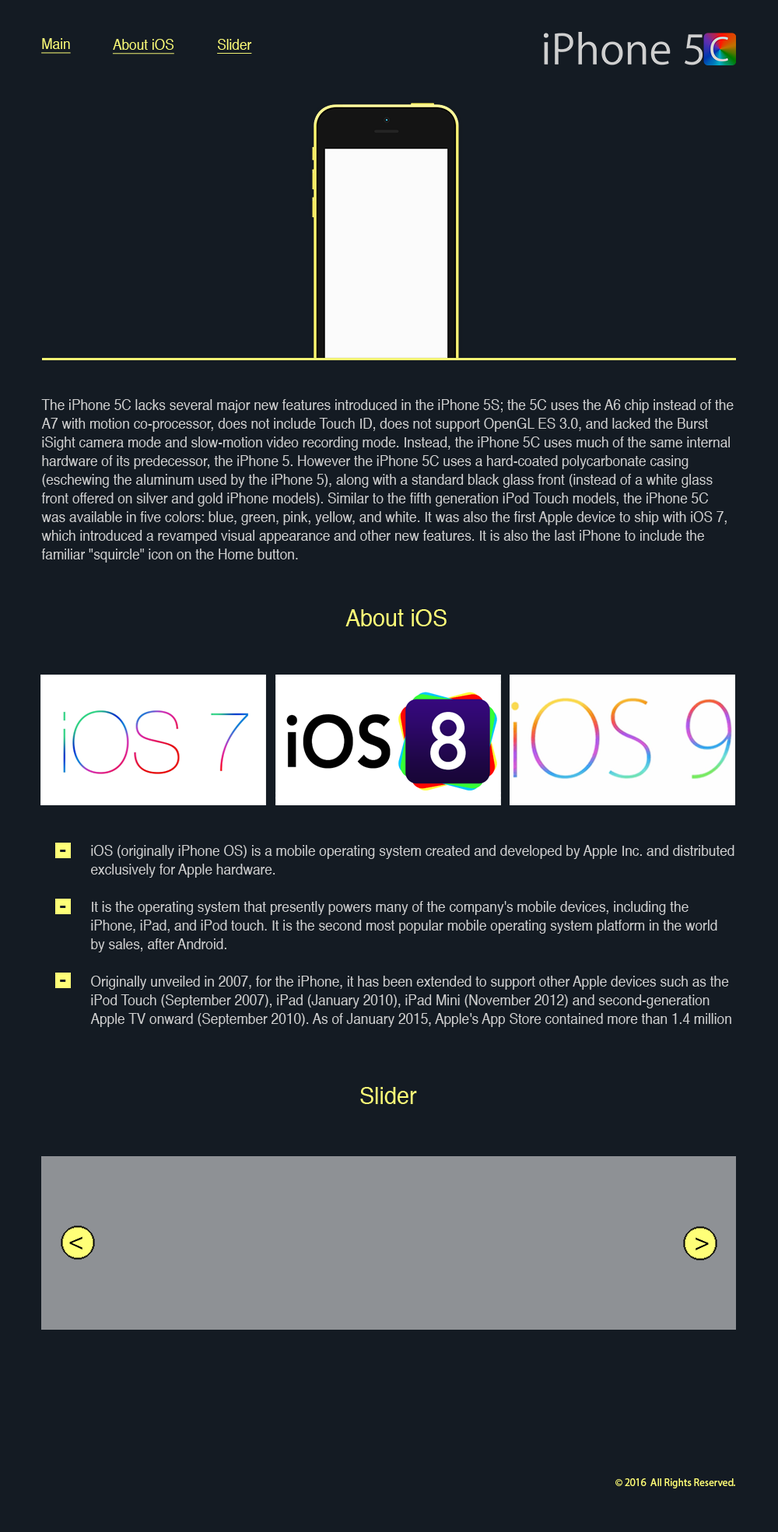
<style>
.page{position:relative;width:778px;height:1532px;background:#141b23}
.page>*{position:absolute;margin:0}
.t1{font:14px "Helvetica";color:#ffff78;text-decoration:underline;scale:0.96 1}
.t2{font:14px/18.7px "Helvetica";color:#cfcfcf;scale:0.96 1}
.t3{font:23.3px "Helvetica";color:#ffff78;scale:0.96 1}
.t4{font:10.9px "MyriadPro-Regular";color:#ffff78;scale:0.96 1}
</style>
<div class="page">
<p class="t1" style="left:41px;top:38px;width:30px;height:16px">Main</p>
<p class="t1" style="left:112px;top:39px;width:62px;height:15px">About iOS</p>
<p class="t1" style="left:217px;top:39px;width:35px;height:15px">Slider</p>
<p class="t2" style="left:41px;top:399px;width:693px;height:164px">The iPhone 5C lacks several major new features introduced in the iPhone 5S; the 5C uses the A6 chip instead of the A7 with motion co-processor, does not include Touch ID, does not support OpenGL ES 3.0, and lacked the Burst iSight camera mode and slow-motion video recording mode. Instead, the iPhone 5C uses much of the same internal hardware of its predecessor, the iPhone 5. However the iPhone 5C uses a hard-coated polycarbonate casing (eschewing the aluminum used by the iPhone 5), along with a standard black glass front (instead of a white glass front offered on silver and gold iPhone models). Similar to the fifth generation iPod Touch models, the iPhone 5C was available in five colors: blue, green, pink, yellow, and white. It was also the first Apple device to ship with iOS 7, which introduced a revamped visual appearance and other new features. It is also the last iPhone to include the familiar "squircle" icon on the Home button.</p>
<p class="t3" style="left:346px;top:609px;width:101px;height:17px">About iOS</p>
<p class="t2" style="left:90px;top:845px;width:645px;height:182px">iOS (originally iPhone OS) is a mobile operating system created and developed by Apple Inc. and distributed exclusively for Apple hardware. <br><br>It is the operating system that presently powers many of the company's mobile devices, including the iPhone, iPad, and iPod touch. It is the second most popular mobile operating system platform in the world by sales, after Android.<br><br>Originally unveiled in 2007, for the iPhone, it has been extended to support other Apple devices such as the iPod Touch (September 2007), iPad (January 2010), iPad Mini (November 2012) and second-generation Apple TV onward (September 2010). As of January 2015, Apple's App Store contained more than 1.4 million iOS applications, 725,000 of which are native for iPads.[8] These mobile apps have collectively been downloaded more than 100 billion times.[9]</p>
<p class="t3" style="left:360px;top:1087px;width:57px;height:17px">Slider</p>
<p class="t4" style="left:616px;top:1479px;width:119px;height:10px">© 2016  All Rights Reserved.</p>
</div>
